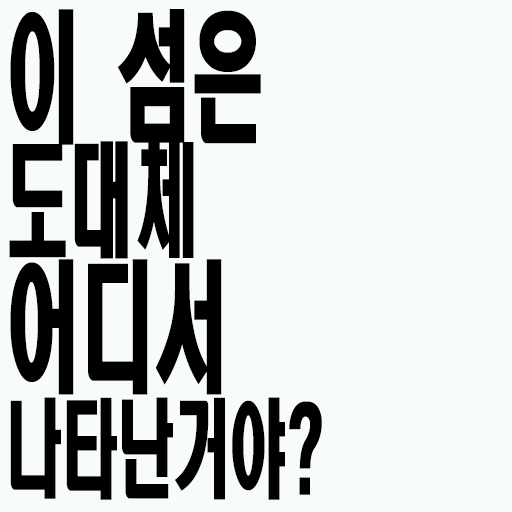
<style>
.page{position:relative;width:512px;height:512px;background:#f8fcf8}
.page>*{position:absolute;margin:0}
.t1{font:106.4px/125px "HeadlineR-HM";color:#000000;scale:0.53 1}
.t2{font:140.6px/125px "HeadlineR-HM";color:#000000;scale:0.53 1}
.t3{font:121.6px/125px "HeadlineR-HM";color:#000000;scale:0.53 1}
</style>
<div class="page">
<p class="t1" style="left:9px;top:9px;width:313px;height:491px"><span class="t2">이 섬은<br></span><span class="t3">도대체<br></span><span class="t2">어디서<br></span>나타난거야?</p>
</div>
